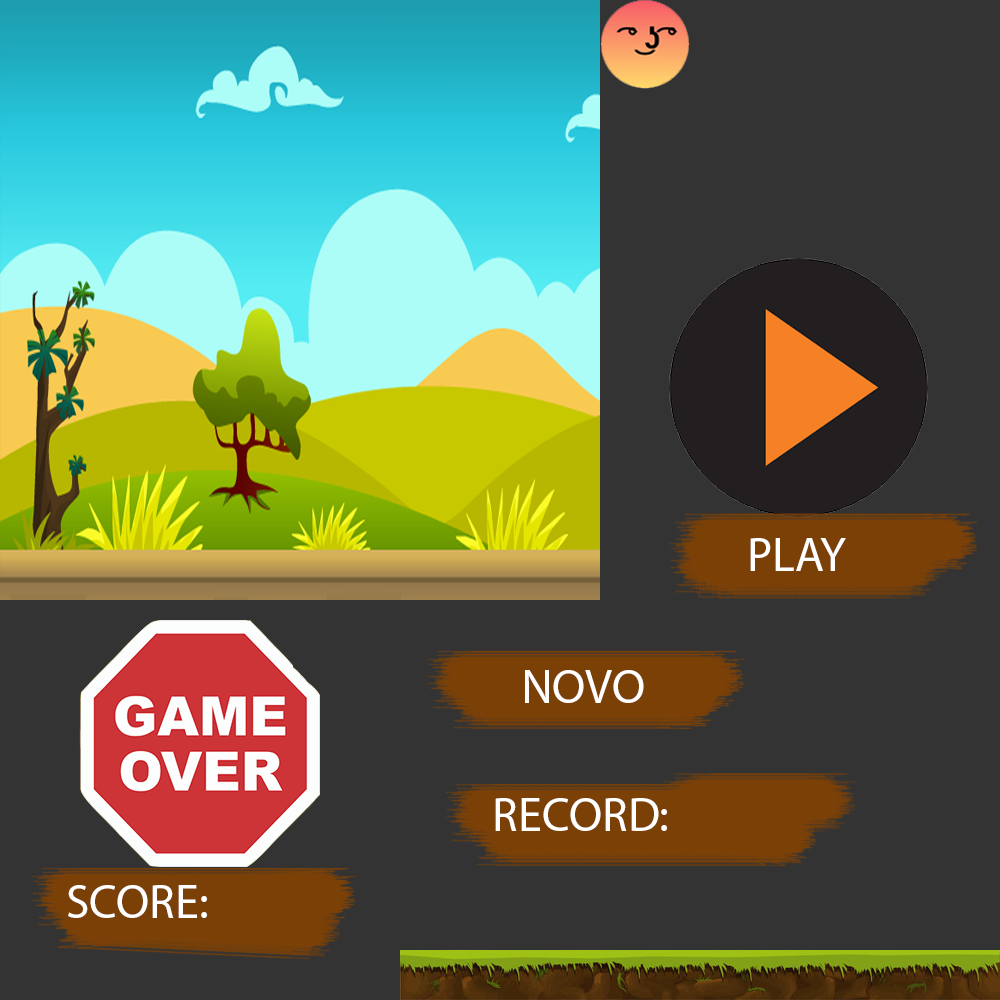
<style>
.page{position:relative;width:1000px;height:1000px;background:#333333}
.page>*{position:absolute;margin:0}
.t1{font:48px "MyriadPro-Regular";color:#ffffff}
</style>
<div class="page">
<p class="t1" style="left:750px;top:538px;width:96px;height:33px">PLAY</p>
<p class="t1" style="left:525px;top:670px;width:119px;height:33px">NOVO</p>
<p class="t1" style="left:495px;top:798px;width:172px;height:33px">RECORD:</p>
<p class="t1" style="left:68px;top:885px;width:139px;height:33px">SCORE:</p>
</div>
